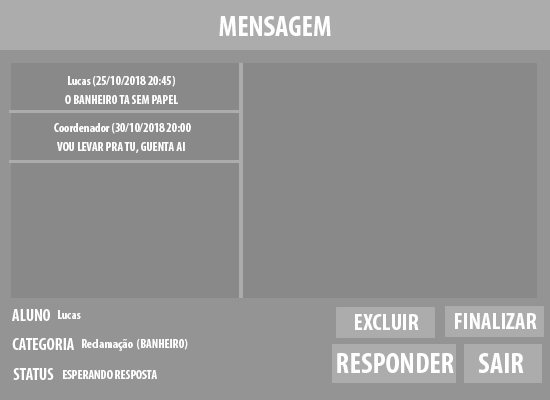
<style>
.page{position:relative;width:550px;height:400px;background:#898989}
.page>*{position:absolute;margin:0}
.t1{font:29.2px "MyriadPro-BoldCond";color:#fefefe}
.t2{font:12.5px "MyriadPro-BoldCond";color:#fefefe}
.t3{font:12.5px "MyriadPro-BoldCond";color:#898989}
.t4{font:16.7px "MyriadPro-BoldCond";color:#fefefe}
.t5{font:23.2px "MyriadPro-BoldCond";color:#fefefe}
.t6{font:29.2px "MyriadPro-BoldCond"}
</style>
<div class="page">
<p class="t1" style="left:219px;top:16px;width:112px;height:20px">MENSAGEM</p>
<p class="t1" style="left:219px;top:16px;width:112px;height:20px">MENSAGEM</p>
<p class="t2" style="left:68px;top:76px;width:107px;height:11px">Lucas (25/10/2018 20:45)</p>
<p class="t2" style="left:68px;top:76px;width:107px;height:11px">Lucas (25/10/2018 20:45)</p>
<p class="t2" style="left:65px;top:95px;width:113px;height:9px">O BANHEIRO TA SEM PAPEL</p>
<p class="t2" style="left:65px;top:95px;width:113px;height:9px">O BANHEIRO TA SEM PAPEL</p>
<p class="t2" style="left:54px;top:123px;width:137px;height:11px">Coordenador (30/10/2018 20:00</p>
<p class="t2" style="left:54px;top:123px;width:137px;height:11px">Coordenador (30/10/2018 20:00</p>
<p class="t3" style="left:60px;top:128px;width:39px;height:9px">Gabrielle</p>
<p class="t2" style="left:57px;top:142px;width:128px;height:11px">VOU LEVAR PRA TU, GUENTA AI</p>
<p class="t2" style="left:57px;top:142px;width:128px;height:11px">VOU LEVAR PRA TU, GUENTA AI</p>
<p class="t4" style="left:12px;top:309px;width:38px;height:12px">ALUNO</p>
<p class="t4" style="left:12px;top:309px;width:38px;height:12px">ALUNO</p>
<p class="t2" style="left:58px;top:310px;width:23px;height:9px">Lucas</p>
<p class="t2" style="left:58px;top:310px;width:23px;height:9px">Lucas</p>
<p class="t5" style="left:355px;top:314px;width:64px;height:16px">EXCLUIR</p>
<p class="t5" style="left:455px;top:313px;width:82px;height:16px">FINALIZAR</p>
<p class="t4" style="left:12px;top:338px;width:62px;height:12px">CATEGORIA</p>
<p class="t4" style="left:12px;top:338px;width:62px;height:12px">CATEGORIA</p>
<p class="t2" style="left:82px;top:339px;width:106px;height:12px">Reclamação  (BANHEIRO)</p>
<p class="t2" style="left:82px;top:339px;width:106px;height:12px">Reclamação  (BANHEIRO)</p>
<p class="t6" style="left:333px;top:353px;width:117px;height:20px">RESPONDER</p>
<p class="t1" style="left:337px;top:353px;width:117px;height:20px">RESPONDER</p>
<p class="t1" style="left:478px;top:353px;width:46px;height:20px">SAIR</p>
<p class="t1" style="left:478px;top:353px;width:46px;height:20px">SAIR</p>
<p class="t1" style="left:478px;top:353px;width:46px;height:20px">SAIR</p>
<p class="t1" style="left:478px;top:353px;width:46px;height:20px">SAIR</p>
<p class="t4" style="left:13px;top:368px;width:41px;height:12px">STATUS</p>
<p class="t4" style="left:13px;top:368px;width:41px;height:12px">STATUS</p>
<p class="t2" style="left:63px;top:370px;width:94px;height:9px">ESPERANDO RESPOSTA</p>
<p class="t2" style="left:63px;top:370px;width:94px;height:9px">ESPERANDO RESPOSTA</p>
</div>
